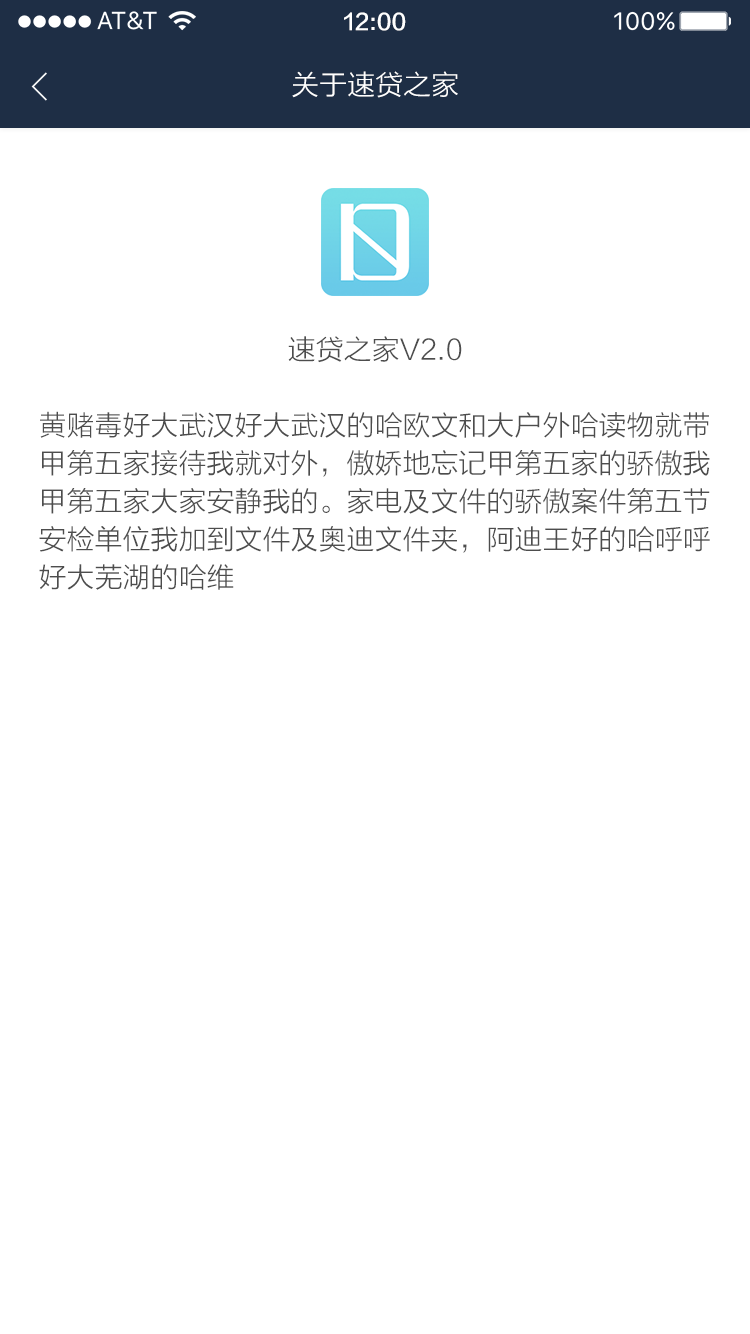
<style>
.page{position:relative;width:750px;height:1334px;background:#ffffff}
.page>*{position:absolute;margin:0}
.t1{font:22px "FZLTZHK--GBK1-0";color:#ffffff}
.t2{font:28px "FZLTXHK";color:#ffffff}
.t3{font:28px "FZLTXHK";color:#4d4d4d}
.t4{font:28px/38px "FZLTXHK";color:#4d4d4d}
</style>
<div class="page">
<p class="t1" style="left:344px;top:12px;width:62px;height:19px">12:00</p>
<p class="t2" style="left:292px;top:71px;width:166px;height:27px">关于速贷之家</p>
<p class="t3" style="left:288px;top:336px;width:174px;height:27px">速贷之家V2.0</p>
<p class="t4" style="left:39px;top:411px;width:671px;height:179px">黄赌毒好大武汉好大武汉的哈欧文和大户外哈读物就带<br>甲第五家接待我就对外，傲娇地忘记甲第五家的骄傲我<br>甲第五家大家安静我的。家电及文件的骄傲案件第五节<br>安检单位我加到文件及奥迪文件夹，阿迪王好的哈呼呼<br>好大芜湖的哈维</p>
</div>
